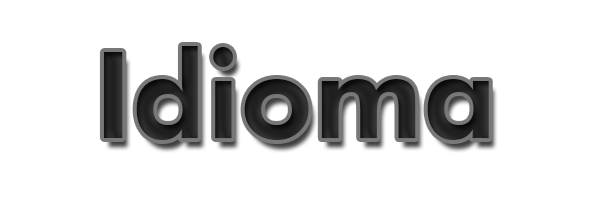
<style>
.page{position:relative;width:600px;height:200px;background:#ffffff}
.page>*{position:absolute;margin:0}
.t1{font:120px "FuturaBT-Heavy";color:#212121}
</style>
<div class="page">
<p class="t1" style="left:103px;top:46px;width:386px;height:94px">Idioma</p>
</div>
